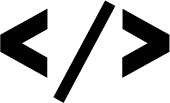
<style>
.page{position:relative;width:170px;height:103px;background:#ffffff}
.page>*{position:absolute;margin:0}
.t1{font:95.9px "Futura-CondensedExtraBold";color:#010101}
</style>
<div class="page">
<p class="t1" style="left:0px;top:0px;width:170px;height:103px">&lt;/&gt;</p>
</div>
